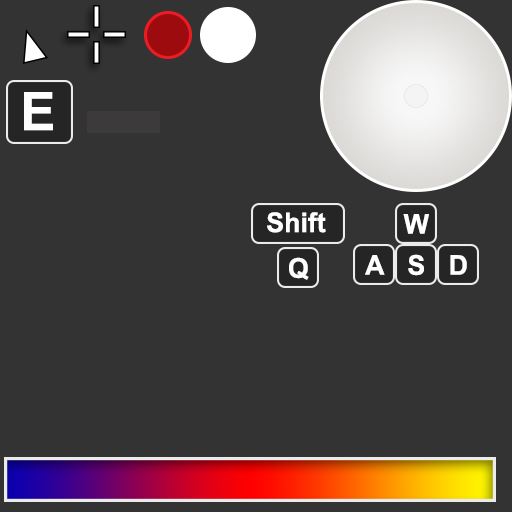
<style>
.page{position:relative;width:512px;height:512px;background:#333333}
.page>*{position:absolute;margin:0}
.t1{font:53.1px "Arial-BoldMT";color:#ffffff}
.t2{font:27.1px "Arial-BoldMT";color:#ffffff}
.t3{font:27.2px "Arial-BoldMT";color:#ffffff}
</style>
<div class="page">
<p class="t1" style="left:24px;top:92px;width:29px;height:39px">E</p>
<p class="t2" style="left:267px;top:212px;width:59px;height:21px">Shift</p>
<p class="t2" style="left:403px;top:214px;width:26px;height:20px">W</p>
<p class="t3" style="left:289px;top:257px;width:20px;height:23px">Q</p>
<p class="t3" style="left:365px;top:255px;width:20px;height:20px">A</p>
<p class="t3" style="left:408px;top:254px;width:16px;height:22px">S</p>
<p class="t3" style="left:450px;top:255px;width:17px;height:20px">D</p>
</div>
